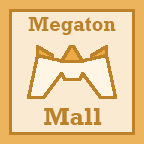
<style>
.page{position:relative;width:144px;height:144px;background:#faead1}
.page>*{position:absolute;margin:0}
.t1{font:20px "Rockwell-Bold";color:#bd8228}
.t2{font:25px "Rockwell-Bold";color:#bd8228}
</style>
<div class="page">
<p class="t1" style="left:28px;top:17px;width:88px;height:18px">Megaton</p>
<p class="t2" style="left:44px;top:108px;width:58px;height:17px">Mall</p>
</div>
